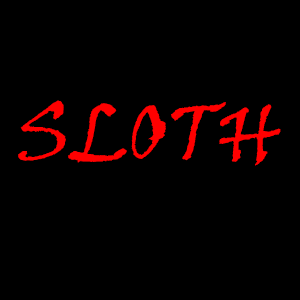
<style>
.page{position:relative;width:300px;height:300px;background:#000000}
.page>*{position:absolute;margin:0}
.t1{font:80px "VinerHandITC";color:#ff0000}
</style>
<div class="page">
<p class="t1" style="left:18px;top:100px;width:263px;height:66px">SLOTH</p>
</div>
